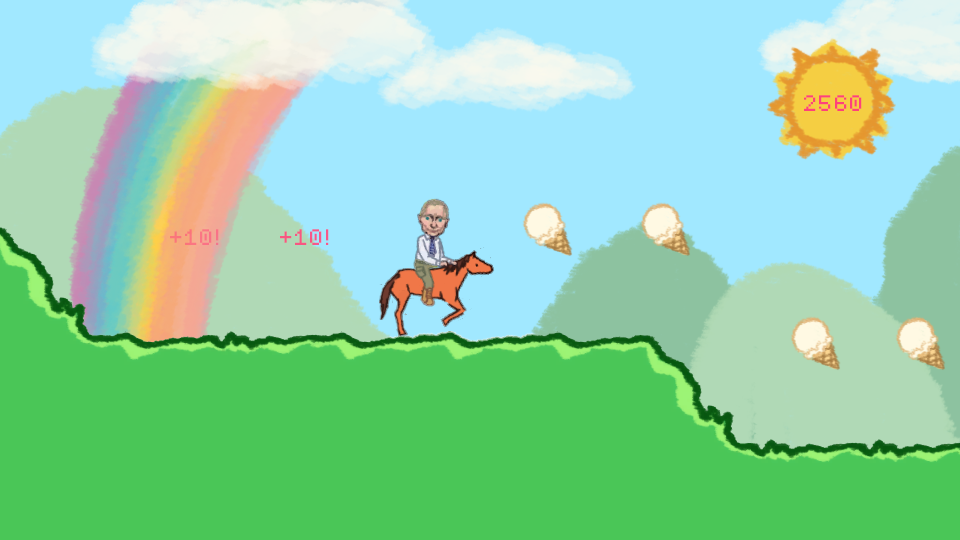
<style>
.page{position:relative;width:960px;height:540px;background:#4ac657}
.page>*{position:absolute;margin:0}
.t1{font:36px "Kubasta";letter-spacing:0.05em;color:#ff417b}
.t2{font:36px "Kubasta";letter-spacing:0.05em;color:#fb7484}
</style>
<div class="page">
<p class="t1" style="left:804px;top:95px;width:58px;height:16px">2560</p>
<p class="t2" style="left:170px;top:229px;width:49px;height:16px">+10!</p>
<p class="t1" style="left:280px;top:229px;width:49px;height:16px;opacity:0.9">+10!</p>
</div>
